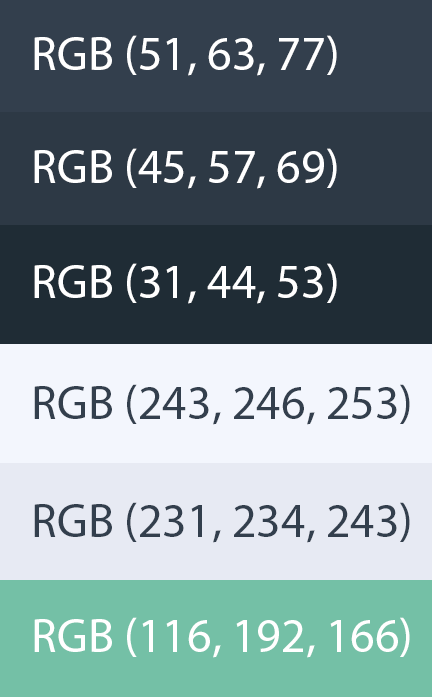
<style>
.page{position:relative;width:432px;height:697px}
.page>*{position:absolute;margin:0}
.t1{font:48px "MyriadPro-Regular";color:#ffffff}
.t2{font:48px "MyriadPro-Regular";color:#333f4d}
</style>
<div class="page">
<p class="t1" style="left:34px;top:35px;width:303px;height:41px">RGB (51, 63, 77)</p>
<p class="t1" style="left:34px;top:148px;width:303px;height:41px">RGB (45, 57, 69)</p>
<p class="t1" style="left:34px;top:263px;width:303px;height:41px">RGB (31, 44, 53)</p>
<p class="t2" style="left:34px;top:384px;width:376px;height:41px">RGB (243, 246, 253)</p>
<p class="t2" style="left:34px;top:502px;width:376px;height:41px">RGB (231, 234, 243)</p>
<p class="t1" style="left:34px;top:617px;width:376px;height:41px">RGB (116, 192, 166)</p>
</div>
